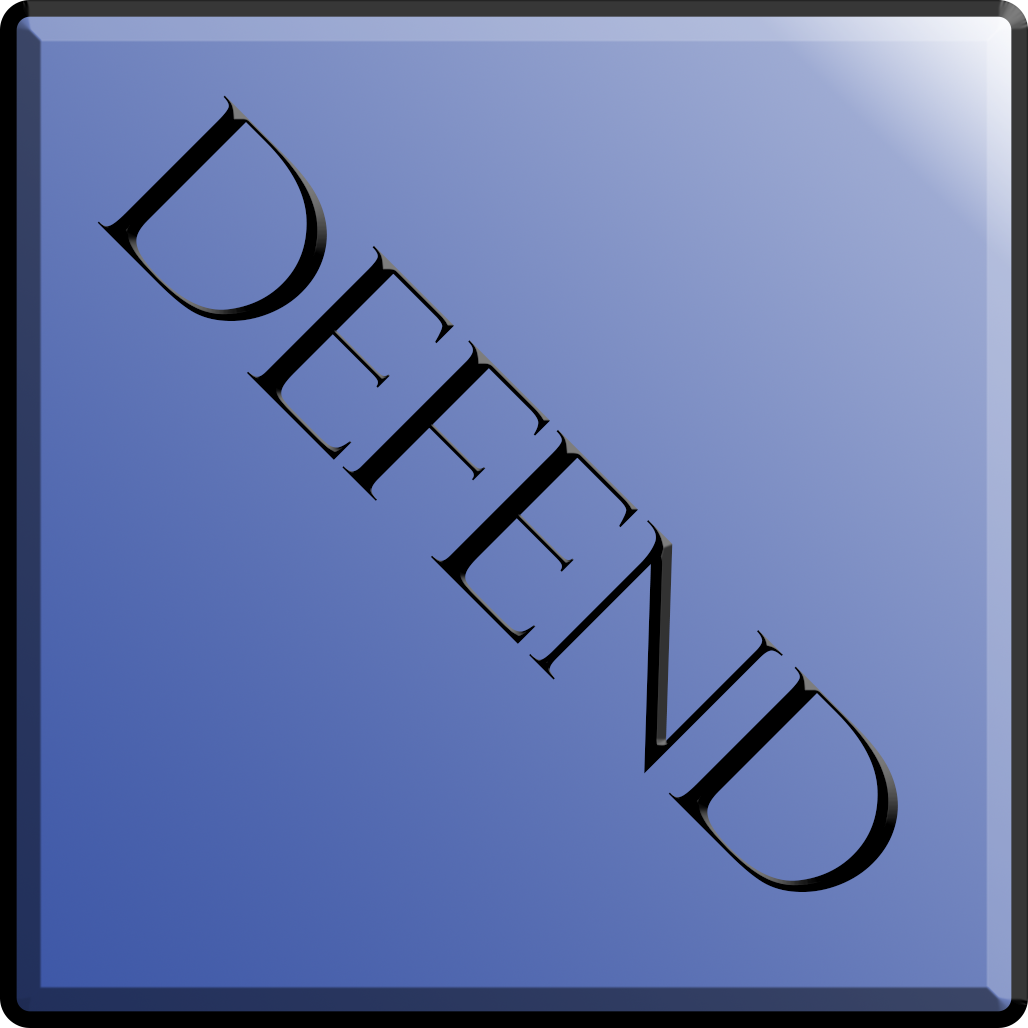
<style>
.page{position:relative;width:1028px;height:1028px}
.page>*{position:absolute;margin:0}
.t1{font:250px "FelixTitlingMT";color:#000000}
</style>
<div class="page">
<p class="t1" style="left:97px;top:95px;width:801px;height:797px;rotate:45deg">Defend</p>
</div>
